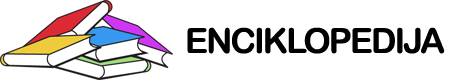
<style>
.page{position:relative;width:450px;height:80px;background:#ffffff}
.page>*{position:absolute;margin:0}
.t1{font:34.7px "ArialRoundedMTBold";letter-spacing:-0.06em;color:#010101}
</style>
<div class="page">
<p class="t1" style="left:187px;top:27px;width:258px;height:27px">ENCIKLOPEDIJA</p>
</div>
